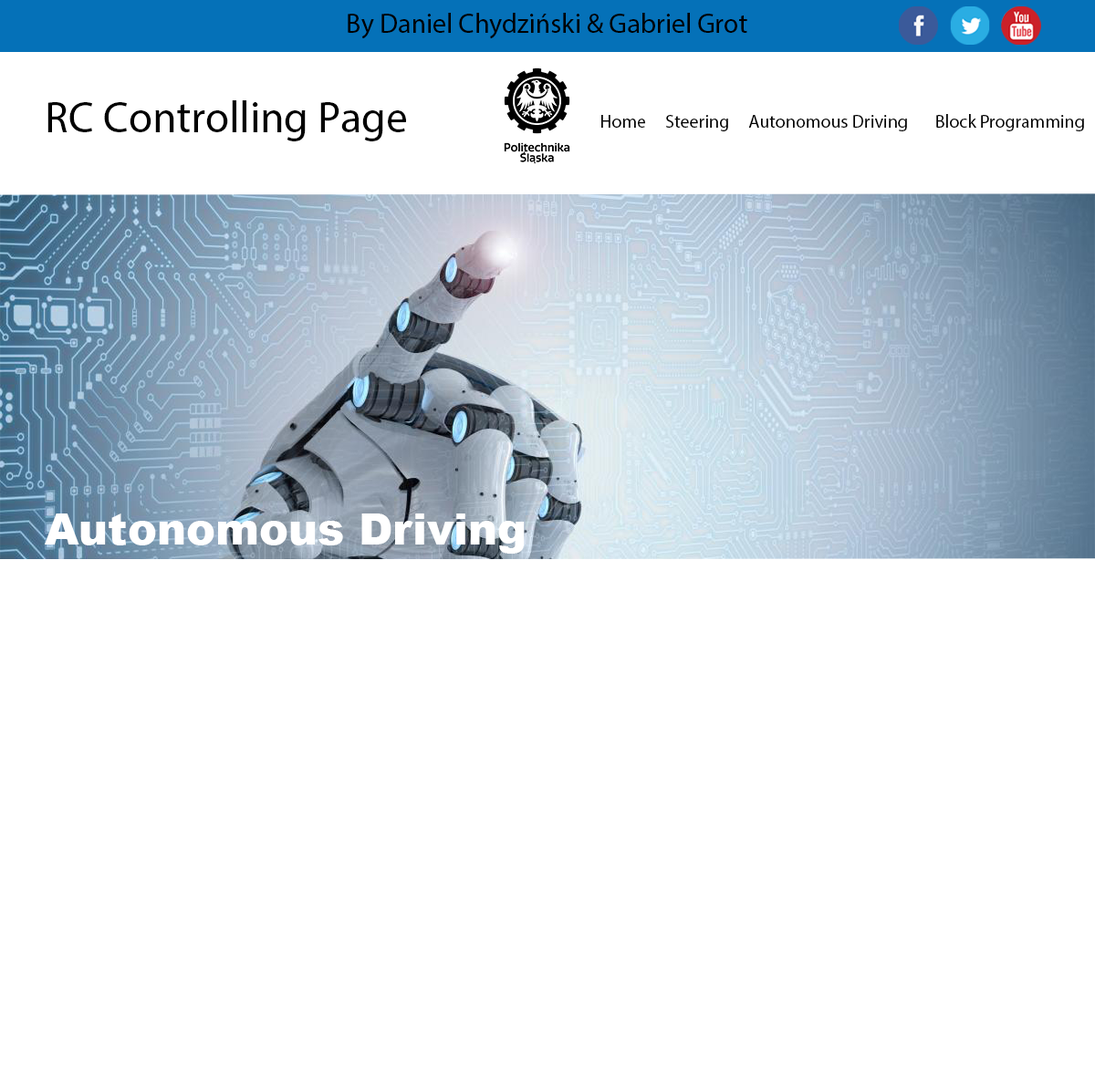
<style>
.page{position:relative;width:1095px;height:1089px;background:#ffffff}
.page>*{position:absolute;margin:0}
.t1{font:27.4px "MyriadPro-Regular";color:#000000}
.t2{font:43.8px "MyriadPro-Regular";color:#000000}
.t3{font:18.2px "MyriadPro-Regular";color:#000000}
.t4{font:43.8px "Arial-Black";color:#ffffff}
</style>
<div class="page">
<p class="t1" style="left:348px;top:13px;width:399px;height:26px">By Daniel Chydziński &amp; Gabriel Grot</p>
<p class="t2" style="left:47px;top:100px;width:359px;height:41px">RC Controlling Page</p>
<p class="t3" style="left:601px;top:114px;width:483px;height:17px">Home     Steering     Autonomous Driving       Block Programming</p>
<p class="t4" style="left:45px;top:514px;width:480px;height:40px">Autonomous Driving</p>
</div>
